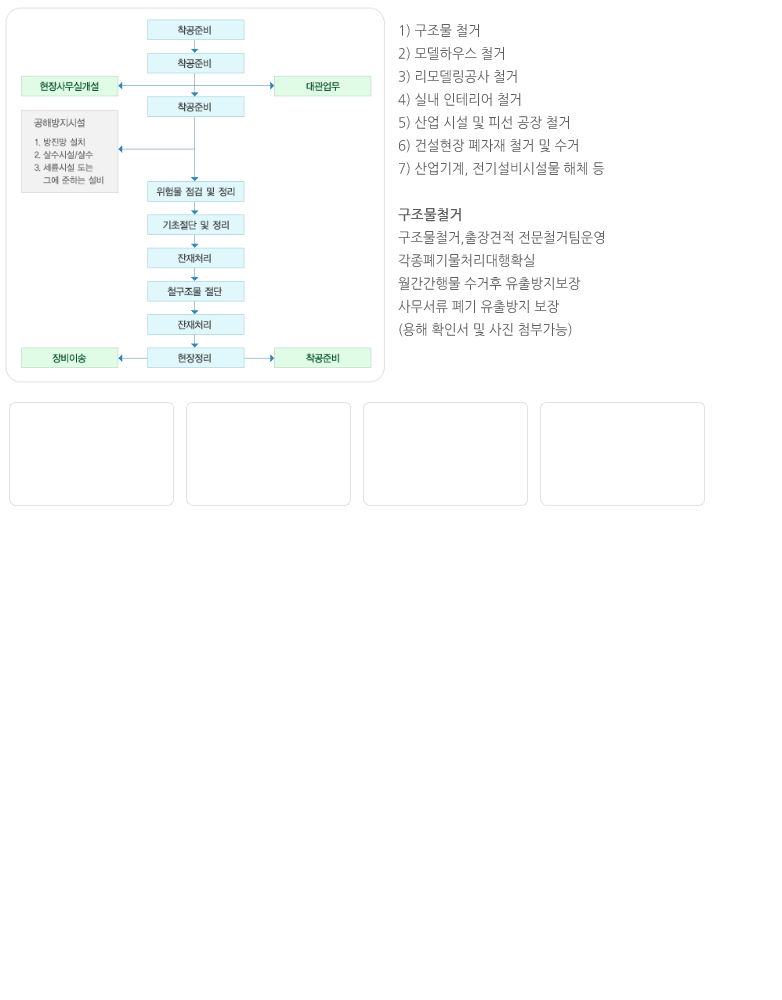
<style>
.page{position:relative;width:782px;height:1000px;background:#ffffff}
.page>*{position:absolute;margin:0}
.t1{font:14px/23px "NanumGothic";color:#5e5e5e;scale:0.95 1}
.t2{font:14px/23px "NanumGothic";color:#5e5e5e;font-weight:bold;scale:0.95 1}
</style>
<div class="page">
<p class="t1" style="left:398px;top:24px;width:207px;height:313px">1) 구조물 철거<br>2) 모델하우스 철거<br>3) 리모델링공사 철거<br>4) 실내 인테리어 철거<br>5) 산업 시설 및 피선 공장 철거<br>6) 건설현장 폐자재 철거 및 수거<br>7) 산업기계, 전기설비시설물 해체 등<br><br><span class="t2">구조물철거<br></span>구조물철거,출장견적 전문철거팀운영 <br>각종폐기물처리대행확실 <br>월간간행물 수거후 유출방지보장<br>사무서류 폐기 유출방지 보장<br>(용해 확인서 및 사진 첨부가능)</p>
</div>
